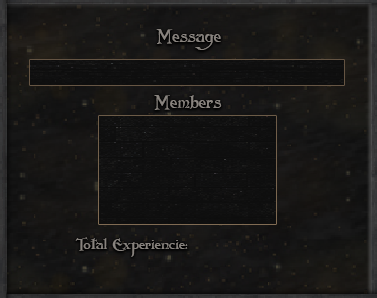
<style>
.page{position:relative;width:377px;height:298px}
.page>*{position:absolute;margin:0}
.t1{font:17.7px "Folkard";color:#88837e}
.t2{font:14.8px "Folkard";color:#88837e}
</style>
<div class="page">
<p class="t1" style="left:156px;top:29px;width:65px;height:21px">Message</p>
<p class="t1" style="left:154px;top:95px;width:68px;height:15px">Members</p>
<p class="t2" style="left:75px;top:237px;width:113px;height:20px">Total Experiencie:</p>
</div>
